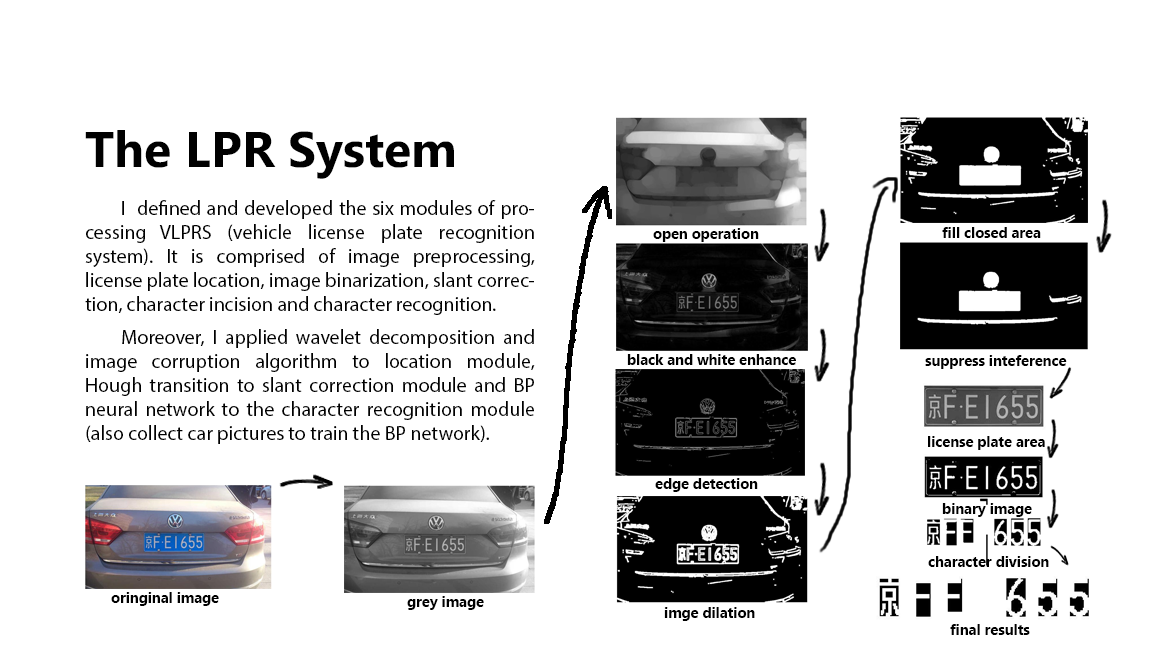
<style>
.page{position:relative;width:1150px;height:660px;background:#ffffff}
.page>*{position:absolute;margin:0}
.t1{font:12px "MicrosoftPhagsPa-Bold";color:#000000}
.t2{font:20px "MyriadPro-Regular";color:#000000}
.t3{font:18.8px "MyriadPro-Regular";color:#000000}
.t4{font:14.6px "MyanmarText-Bold";color:#000000}
</style>
<div class="page">
<p class="t1" style="left:85px;top:130px;width:369px;height:49px">The LPR System</p>
<p class="t2" style="left:85px;top:200px;width:450px;height:244px;text-align:justify"><span class="t3"> </span>I  defined and developed the six modules of processing VLPRS (vehicle license plate recognition system). It is comprised of image preprocessing, license plate location, image binarization, slant correction, character incision and character recognition.<br> Moreover, I applied wavelet decomposition and image corruption algorithm to location module, Hough transition to slant correction module and BP neural network to the character recognition module (also collect car pictures to train the BP network).</p>
<p class="t4" style="left:653px;top:228px;width:106px;height:14px">open operation</p>
<p class="t4" style="left:942px;top:227px;width:99px;height:11px">fill closed area</p>
<p class="t4" style="left:627px;top:354px;width:169px;height:11px">black and white enhance</p>
<p class="t4" style="left:925px;top:355px;width:142px;height:14px">suppress inteference</p>
<p class="t4" style="left:928px;top:436px;width:117px;height:14px">license plate area</p>
<p class="t4" style="left:655px;top:478px;width:103px;height:14px">edge detection</p>
<p class="t4" style="left:942px;top:503px;width:90px;height:14px">binary image</p>
<p class="t4" style="left:928px;top:556px;width:121px;height:11px">character division</p>
<p class="t4" style="left:111px;top:592px;width:108px;height:14px">oringinal image</p>
<p class="t4" style="left:407px;top:596px;width:77px;height:14px">grey image</p>
<p class="t4" style="left:664px;top:607px;width:91px;height:14px">imge dilation</p>
<p class="t4" style="left:950px;top:624px;width:80px;height:11px">final results</p>
</div>
